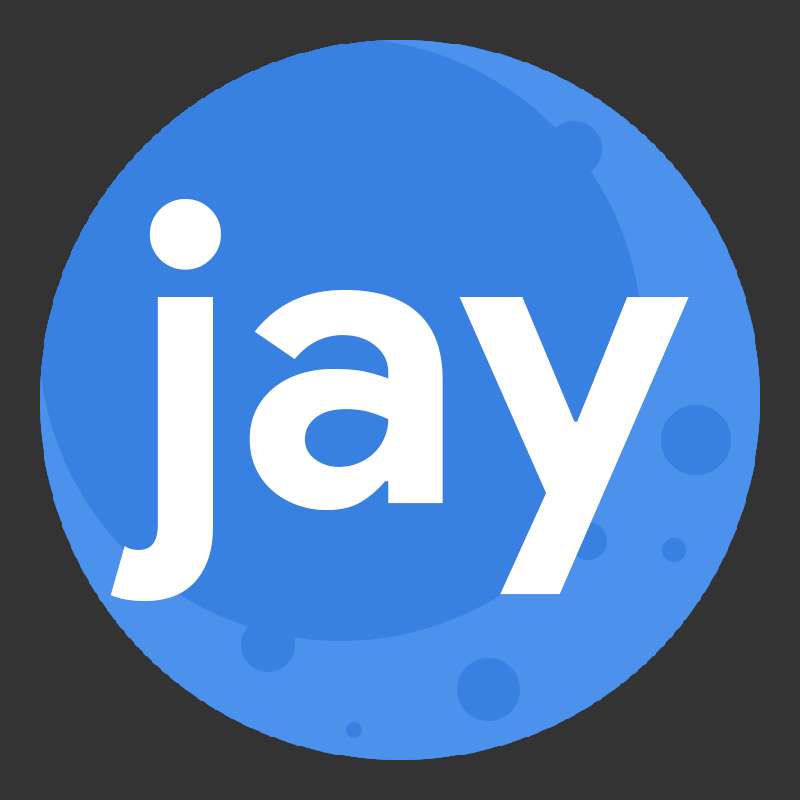
<style>
.page{position:relative;width:800px;height:800px;background:#333333}
.page>*{position:absolute;margin:0}
.t1{font:420px "ProductSans-Bold";color:#ffffff}
</style>
<div class="page">
<p class="t1" style="left:110px;top:199px;width:579px;height:402px">jay</p>
</div>
